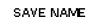
<style>
.page{position:relative;width:100px;height:25px;background:#ffffff}
.page>*{position:absolute;margin:0}
.t1{font:12.5px "Small Fonts";color:#000000}
</style>
<div class="page">
<p class="t1" style="left:13px;top:8px;width:73px;height:9px">SAVE NAME</p>
</div>
